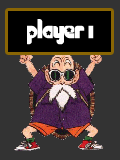
<style>
.page{position:relative;width:120px;height:160px;background:#333333}
.page>*{position:absolute;margin:0}
.t1{font:24px "Chick";color:#ffffff}
</style>
<div class="page">
<p class="t1" style="left:27px;top:19px;width:67px;height:26px">player 1</p>
</div>
